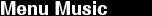
<style>
.page{position:relative;width:152px;height:16px;background:#000000}
.page>*{position:absolute;margin:0}
.t1{font:17.2px "FolkPro-Heavy";color:#ffffff}
</style>
<div class="page">
<p class="t1" style="left:1px;top:1px;width:106px;height:14px">Menu Music</p>
</div>
